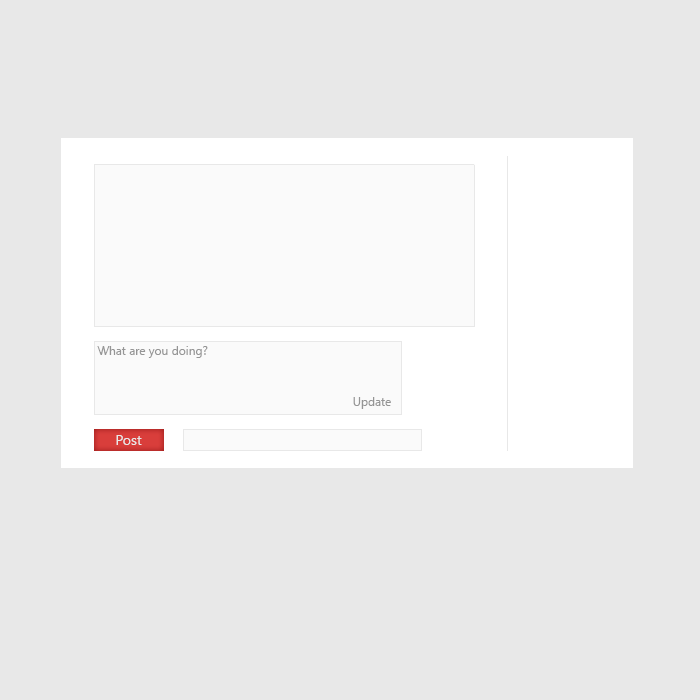
<style>
.page{position:relative;width:700px;height:700px;background:#e8e8e8}
.page>*{position:absolute;margin:0}
.t1{font:12px "LeelawadeeUI";color:#959595}
</style>
<div class="page">
<p class="t1" style="left:97px;top:346px;width:111px;height:12px">What are you doing?</p>
<p class="t1" style="left:353px;top:397px;width:38px;height:12px">Update</p>
</div>
